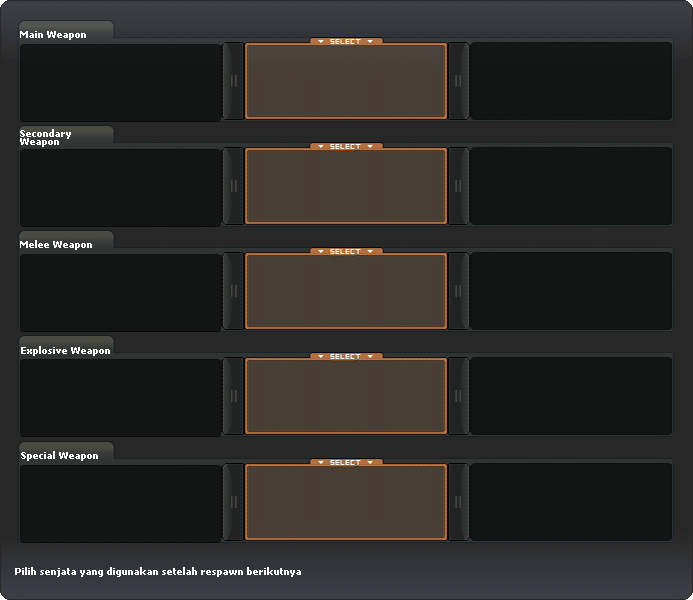
<style>
.page{position:relative;width:693px;height:600px;background:#131515}
.page>*{position:absolute;margin:0}
.t1{font:10.4px "Tahoma-Bold";color:#ffffff}
.t2{font:10.4px/8.3px "Tahoma-Bold";color:#ffffff}
</style>
<div class="page">
<p class="t1" style="left:20px;top:31px;width:66px;height:9px">Main Weapon</p>
<p class="t2" style="left:20px;top:129px;width:51px;height:18px">Secondary<br>Weapon</p>
<p class="t1" style="left:20px;top:240px;width:72px;height:10px">Melee Weapon</p>
<p class="t1" style="left:21px;top:346px;width:89px;height:10px">Explosive Weapon</p>
<p class="t1" style="left:21px;top:451px;width:77px;height:10px">Special Weapon</p>
<p class="t1" style="left:15px;top:567px;width:286px;height:10px">Pilih senjata yang digunakan setelah respawn berikutnya</p>
</div>
